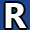
<style>
.page{position:relative;width:30px;height:30px;background:#ffffff}
.page>*{position:absolute;margin:0}
.t1{font:35px "SegoeUI-Bold";color:#ffffff}
</style>
<div class="page">
<p class="t1" style="left:5px;top:3px;width:22px;height:25px">R</p>
</div>
